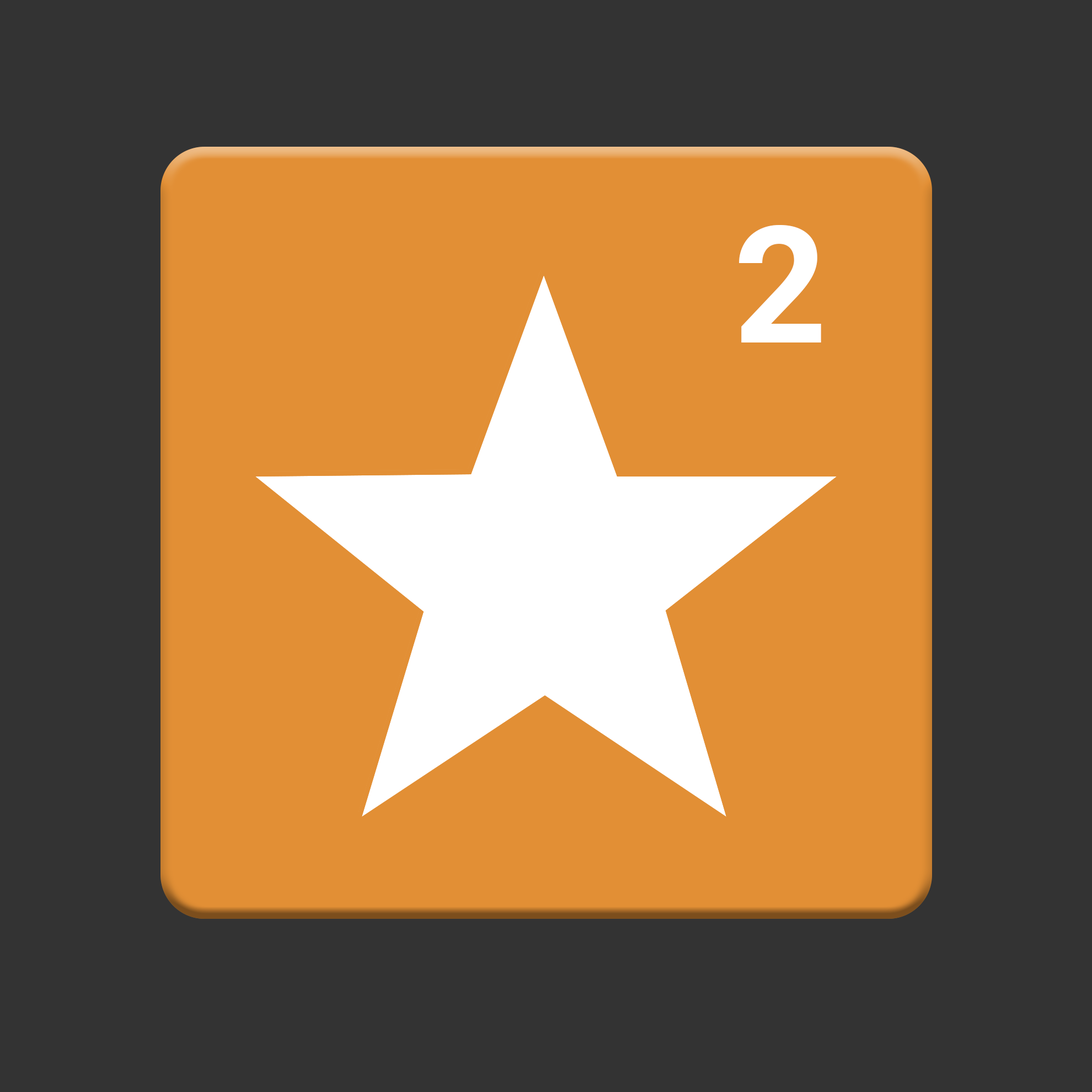
<style>
.page{position:relative;width:1092px;height:1092px;background:#333333}
.page>*{position:absolute;margin:0}
.t1{font:163.2px "Roboto-Bold";color:#ffffff;font-variant:small-caps}
</style>
<div class="page">
<p class="t1" style="left:739px;top:225px;width:82px;height:117px">2</p>
</div>
